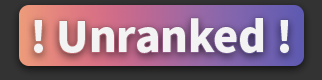
<style>
.page{position:relative;width:322px;height:80px}
.page>*{position:absolute;margin:0}
.t1{font:42.2px "NotoSansCJKkr-Black";color:#f3f3f3}
</style>
<div class="page">
<p class="t1" style="left:34px;top:18px;width:255px;height:35px">! Unranked !</p>
</div>
